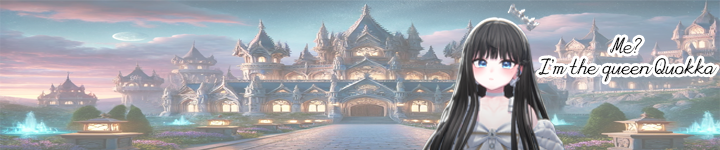
<style>
.page{position:relative;width:720px;height:150px}
.page>*{position:absolute;margin:0}
.t1{font:20.4px/20.8px "Continuous";color:#000000}
</style>
<div class="page">
<p class="t1" style="left:538px;top:37px;width:179px;height:45px;text-align:center">Me?<br>I’m the queen Quokka</p>
</div>
